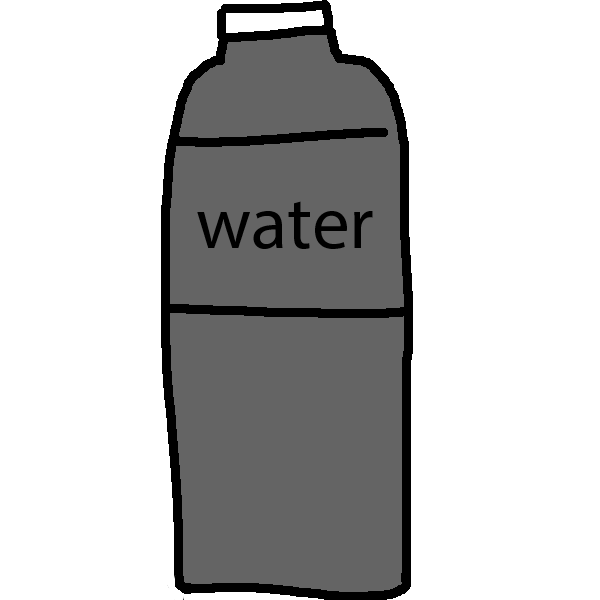
<style>
.page{position:relative;width:600px;height:600px;background:#ffffff}
.page>*{position:absolute;margin:0}
.t1{font:75px "MyriadPro-Regular";color:#000000}
</style>
<div class="page">
<p class="t1" style="left:197px;top:201px;width:176px;height:48px">water</p>
</div>
